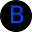
<style>
.page{position:relative;width:32px;height:32px;background:#000000}
.page>*{position:absolute;margin:0}
.t1{font:24px "DejaVuSans";color:#0040ff}
</style>
<div class="page">
<p class="t1" style="left:10px;top:5px;width:14px;height:18px">B</p>
</div>
